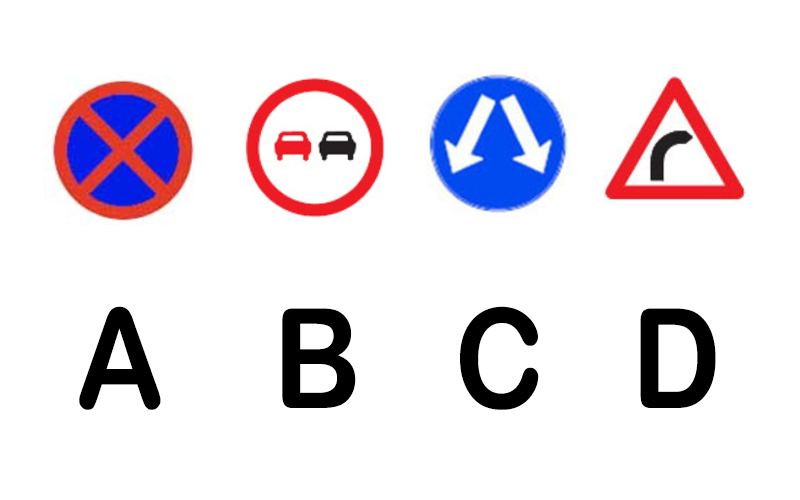
<style>
.page{position:relative;width:800px;height:500px;background:#ffffff}
.page>*{position:absolute;margin:0}
.t1{font:138.9px "ArialRoundedMTBold";color:#000000;scale:0.88 1}
</style>
<div class="page">
<p class="t1" style="left:79px;top:306px;width:82px;height:104px">A</p>
<p class="t1" style="left:282px;top:308px;width:74px;height:100px">B</p>
<p class="t1" style="left:460px;top:306px;width:79px;height:104px">C</p>
<p class="t1" style="left:640px;top:308px;width:76px;height:100px">D</p>
</div>
